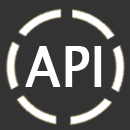
<style>
.page{position:relative;width:130px;height:130px;background:#333333}
.page>*{position:absolute;margin:0}
.t1{font:56px "LucidaSansUnicode";color:#ffffff;font-weight:bold;scale:0.9 1}
</style>
<div class="page">
<p class="t1" style="left:25px;top:46px;width:77px;height:41px">API</p>
</div>
